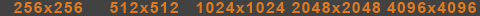
<style>
.page{position:relative;width:480px;height:16px;background:#424242}
.page>*{position:absolute;margin:0}
.t1{font:15px "Arial-BoldMT";letter-spacing:0.06em;color:#df7a1f;scale:1.09 1}
.t2{font:11.7px "Arial-BoldMT";color:#df7a1f}
.t3{font:16.1px "Arial-BoldMT";color:#df7a1f;scale:1.09 1}
.t4{font:16.1px "Arial-BoldMT";scale:1.09 1}
.t5{font:11.7px "Arial-BoldMT"}
</style>
<div class="page">
<p class="t1" style="left:14px;top:2px;width:69px;height:11px">256x256</p>
<p class="t2" style="left:44px;top:5px;width:8px;height:9px">X</p>
<p class="t1" style="left:110px;top:2px;width:68px;height:11px">512x512</p>
<p class="t2" style="left:140px;top:5px;width:8px;height:9px">X</p>
<p class="t1" style="left:196px;top:2px;width:89px;height:11px">1024x1024</p>
<p class="t2" style="left:236px;top:5px;width:8px;height:9px">X</p>
<p class="t3" style="left:246px;top:2px;width:38px;height:12px">1024</p>
<p class="t1" style="left:292px;top:2px;width:89px;height:11px">2048x2048</p>
<p class="t2" style="left:332px;top:5px;width:8px;height:9px">X</p>
<p class="t4" style="left:343px;top:2px;width:38px;height:12px">2048</p>
<p class="t4" style="left:386px;top:2px;width:39px;height:12px">4096</p>
<p class="t1" style="left:387px;top:2px;width:89px;height:11px">4096x4096</p>
<p class="t5" style="left:428px;top:5px;width:8px;height:9px">X</p>
<p class="t4" style="left:438px;top:2px;width:39px;height:12px">4096</p>
</div>
